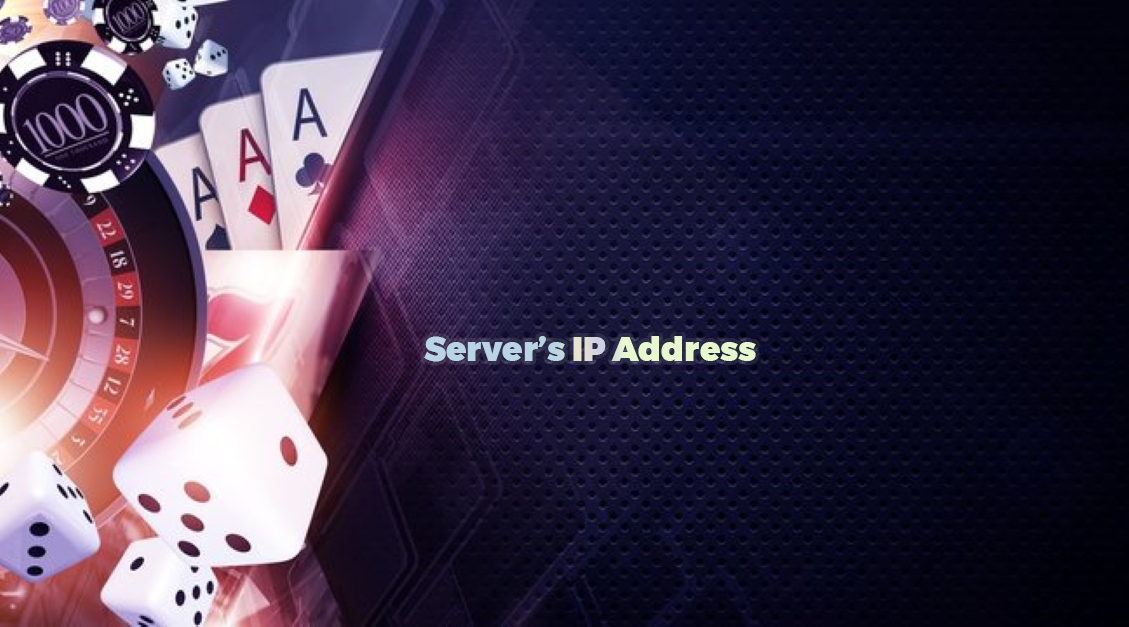
<style>
.page{position:relative;width:1129px;height:627px}
.page>*{position:absolute;margin:0}
.t1{font:33.3px "#9Slide03MontserratBlack"}
</style>
<div class="page">
<p class="t1" style="left:424px;top:336px;width:332px;height:26px">Server’s IP Address</p>
</div>
